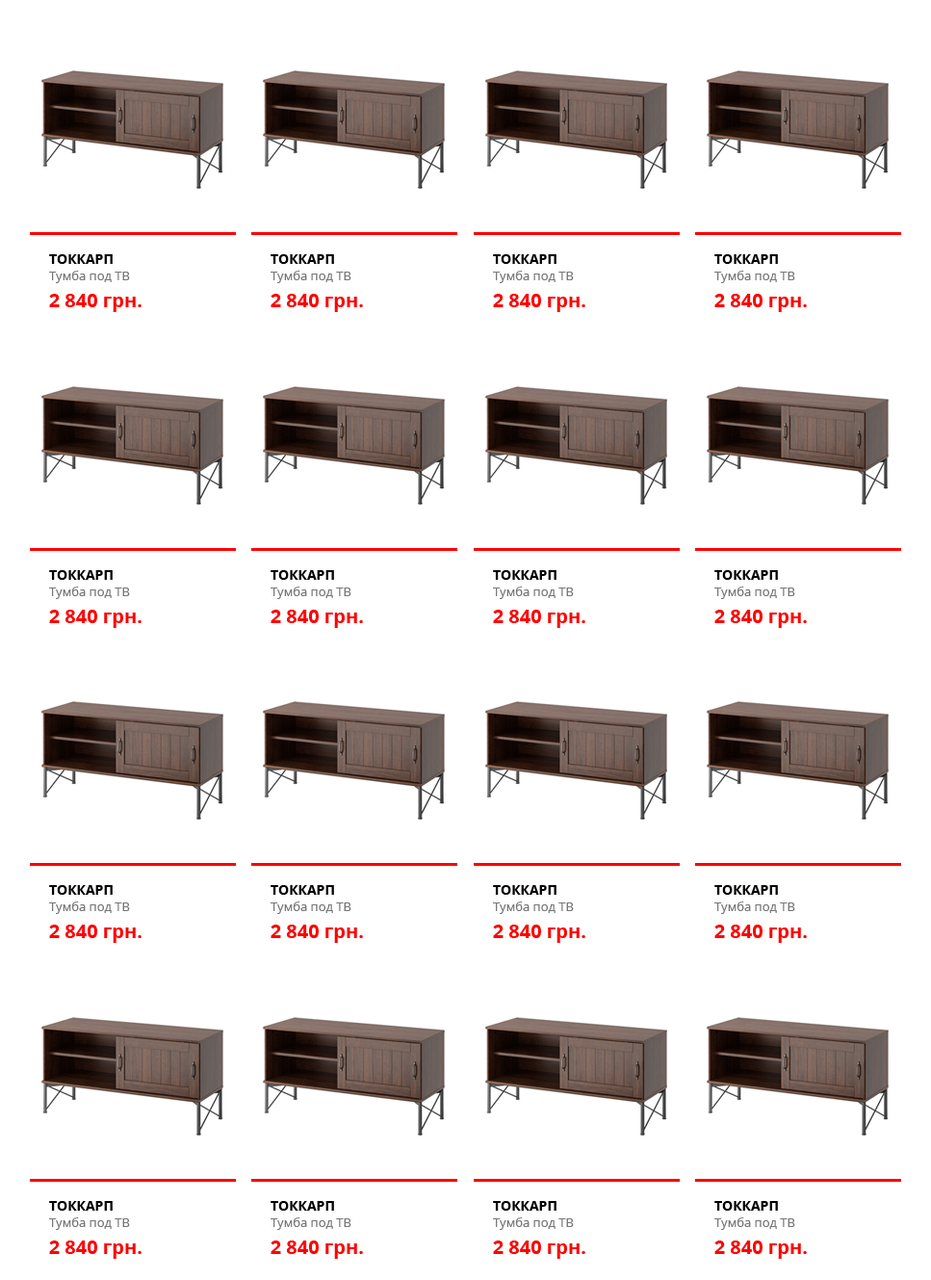
<style>
.page{position:relative;width:931px;height:1280px;background:#ffffff}
.page>*{position:absolute;margin:0}
.t1{font:13.5px "OpenSans-Bold";color:#000000;text-transform:uppercase}
.t2{font:12.5px "OpenSans";color:#777779}
.t3{font:19.3px "OpenSans-Bold";color:#ff0000}
</style>
<div class="page">
<p class="t1" style="left:49px;top:254px;width:64px;height:10px">ТОККАРП</p>
<p class="t1" style="left:271px;top:254px;width:63px;height:10px">ТОККАРП</p>
<p class="t1" style="left:493px;top:254px;width:64px;height:10px">ТОККАРП</p>
<p class="t1" style="left:715px;top:254px;width:63px;height:10px">ТОККАРП</p>
<p class="t2" style="left:49px;top:271px;width:81px;height:12px">Тумба под ТВ</p>
<p class="t2" style="left:271px;top:271px;width:81px;height:12px">Тумба под ТВ</p>
<p class="t2" style="left:493px;top:271px;width:81px;height:12px">Тумба под ТВ</p>
<p class="t2" style="left:715px;top:271px;width:81px;height:12px">Тумба под ТВ</p>
<p class="t3" style="left:49px;top:294px;width:93px;height:18px">2 840 грн.</p>
<p class="t3" style="left:271px;top:294px;width:92px;height:18px">2 840 грн.</p>
<p class="t3" style="left:493px;top:294px;width:93px;height:18px">2 840 грн.</p>
<p class="t3" style="left:715px;top:294px;width:92px;height:18px">2 840 грн.</p>
<p class="t1" style="left:49px;top:570px;width:64px;height:10px">ТОККАРП</p>
<p class="t1" style="left:271px;top:570px;width:63px;height:10px">ТОККАРП</p>
<p class="t1" style="left:493px;top:570px;width:64px;height:10px">ТОККАРП</p>
<p class="t1" style="left:715px;top:570px;width:63px;height:10px">ТОККАРП</p>
<p class="t2" style="left:49px;top:587px;width:81px;height:12px">Тумба под ТВ</p>
<p class="t2" style="left:271px;top:587px;width:81px;height:12px">Тумба под ТВ</p>
<p class="t2" style="left:493px;top:587px;width:81px;height:12px">Тумба под ТВ</p>
<p class="t2" style="left:715px;top:587px;width:81px;height:12px">Тумба под ТВ</p>
<p class="t3" style="left:49px;top:610px;width:93px;height:18px">2 840 грн.</p>
<p class="t3" style="left:271px;top:610px;width:92px;height:18px">2 840 грн.</p>
<p class="t3" style="left:493px;top:610px;width:93px;height:18px">2 840 грн.</p>
<p class="t3" style="left:715px;top:610px;width:92px;height:18px">2 840 грн.</p>
<p class="t1" style="left:49px;top:885px;width:64px;height:10px">ТОККАРП</p>
<p class="t1" style="left:271px;top:885px;width:63px;height:10px">ТОККАРП</p>
<p class="t1" style="left:493px;top:885px;width:64px;height:10px">ТОККАРП</p>
<p class="t1" style="left:715px;top:885px;width:63px;height:10px">ТОККАРП</p>
<p class="t2" style="left:49px;top:902px;width:81px;height:12px">Тумба под ТВ</p>
<p class="t2" style="left:271px;top:902px;width:81px;height:12px">Тумба под ТВ</p>
<p class="t2" style="left:493px;top:902px;width:81px;height:12px">Тумба под ТВ</p>
<p class="t2" style="left:715px;top:902px;width:81px;height:12px">Тумба под ТВ</p>
<p class="t3" style="left:49px;top:925px;width:93px;height:18px">2 840 грн.</p>
<p class="t3" style="left:271px;top:925px;width:92px;height:18px">2 840 грн.</p>
<p class="t3" style="left:493px;top:925px;width:93px;height:18px">2 840 грн.</p>
<p class="t3" style="left:715px;top:925px;width:92px;height:18px">2 840 грн.</p>
<p class="t1" style="left:49px;top:1201px;width:64px;height:10px">ТОККАРП</p>
<p class="t1" style="left:271px;top:1201px;width:63px;height:10px">ТОККАРП</p>
<p class="t1" style="left:493px;top:1201px;width:64px;height:10px">ТОККАРП</p>
<p class="t1" style="left:715px;top:1201px;width:63px;height:10px">ТОККАРП</p>
<p class="t2" style="left:49px;top:1218px;width:81px;height:12px">Тумба под ТВ</p>
<p class="t2" style="left:271px;top:1218px;width:81px;height:12px">Тумба под ТВ</p>
<p class="t2" style="left:493px;top:1218px;width:81px;height:12px">Тумба под ТВ</p>
<p class="t2" style="left:715px;top:1218px;width:81px;height:12px">Тумба под ТВ</p>
<p class="t3" style="left:49px;top:1241px;width:93px;height:18px">2 840 грн.</p>
<p class="t3" style="left:271px;top:1241px;width:92px;height:18px">2 840 грн.</p>
<p class="t3" style="left:493px;top:1241px;width:93px;height:18px">2 840 грн.</p>
<p class="t3" style="left:715px;top:1241px;width:92px;height:18px">2 840 грн.</p>
</div>
